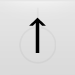
<style>
.page{position:relative;width:75px;height:75px}
.page>*{position:absolute;margin:0}
.t1{font:52.2px "SegoeUISymbol";color:#000000}
</style>
<div class="page">
<p class="t1" style="left:29px;top:17px;width:17px;height:36px">↑</p>
</div>
